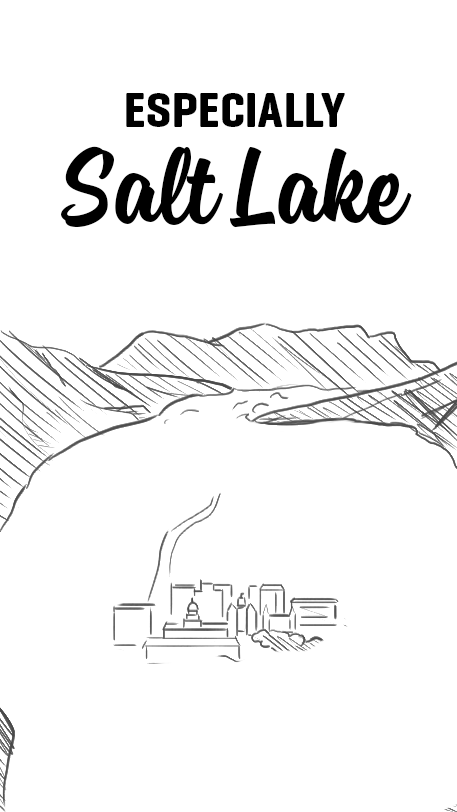
<style>
.page{position:relative;width:457px;height:812px;background:#ffffff}
.page>*{position:absolute;margin:0}
.t1{font:50px "GeogrotesqueCond-Bd";letter-spacing:0.005em;color:#000000;text-transform:uppercase}
.t2{font:125px "Sanelma";letter-spacing:0.005em;color:#000000}
.t3{font:125px "Sanelma";letter-spacing:0.005em;color:#000000;text-transform:uppercase}
</style>
<div class="page">
<p class="t1" style="left:126px;top:93px;width:219px;height:34px">ESpecially</p>
<p class="t2" style="left:61px;top:146px;width:351px;height:82px"><span class="t3">S</span>alt Lake</p>
</div>
